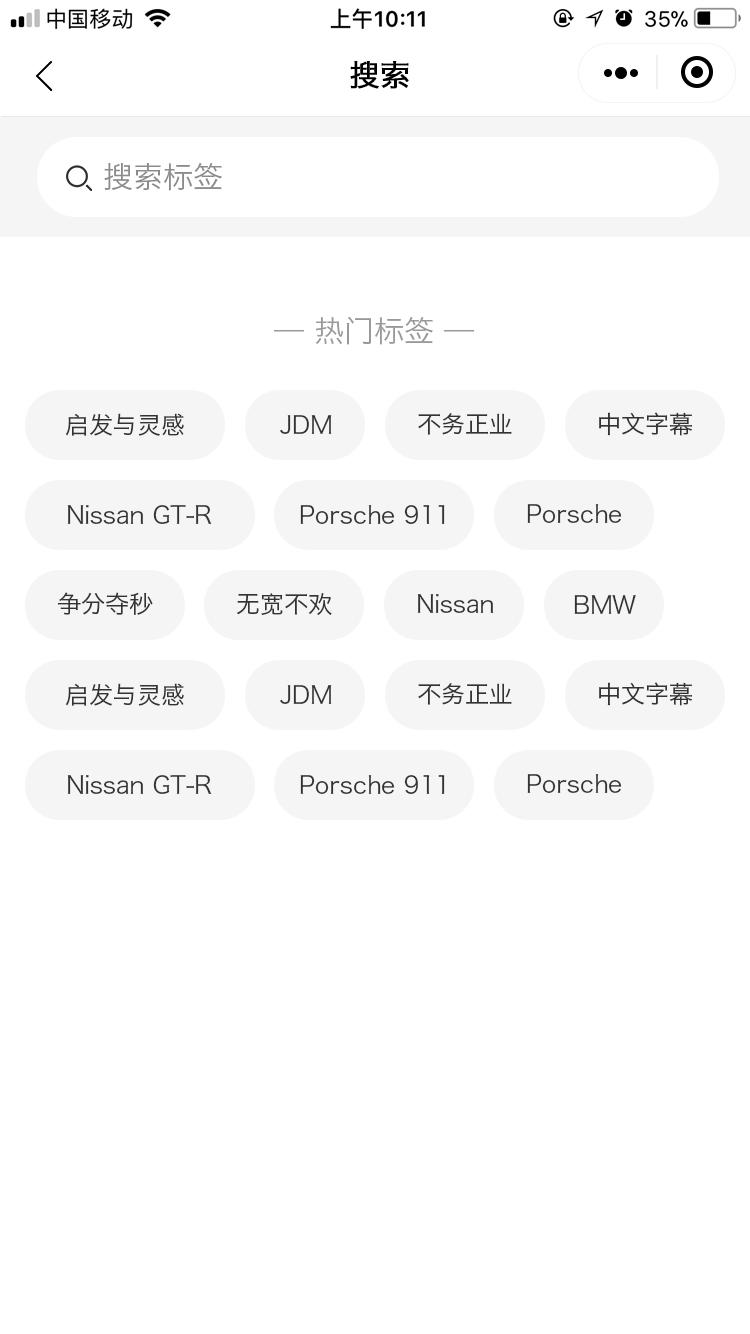
<style>
.page{position:relative;width:750px;height:1334px;background:#ffffff}
.page>*{position:absolute;margin:0}
.t1{font:30px "HiraginoSansGB-W3";color:#000000;text-transform:uppercase;font-weight:bold}
.t2{font:30px "HiraginoSansGB-W3";color:#8b8b8b;text-transform:uppercase}
.t3{font:30px "HiraginoSansGB-W3";color:#999999;text-transform:uppercase}
.t4{font:24px "HiraginoSansGB-W3";color:#333333;text-transform:uppercase}
.t5{font:24px "HiraginoSansGB-W3";color:#333333}
</style>
<div class="page">
<p class="t1" style="left:350px;top:61px;width:59px;height:28px">搜索</p>
<p class="t2" style="left:104px;top:163px;width:118px;height:28px">搜索标签</p>
<p class="t3" style="left:273px;top:316px;width:202px;height:29px">— 热门标签 —</p>
<p class="t4" style="left:65px;top:413px;width:119px;height:23px">启发与灵感</p>
<p class="t4" style="left:418px;top:413px;width:94px;height:22px">不务正业</p>
<p class="t4" style="left:599px;top:412px;width:93px;height:24px">中文字幕</p>
<p class="t4" style="left:280px;top:415px;width:52px;height:19px">JDM</p>
<p class="t5" style="left:67px;top:505px;width:145px;height:19px">Nissan GT-R</p>
<p class="t5" style="left:300px;top:505px;width:145px;height:19px">Porsche 911</p>
<p class="t5" style="left:527px;top:504px;width:95px;height:19px">Porsche</p>
<p class="t4" style="left:58px;top:592px;width:95px;height:23px">争分夺秒</p>
<p class="t4" style="left:236px;top:593px;width:96px;height:22px">无宽不欢</p>
<p class="t5" style="left:417px;top:594px;width:77px;height:19px">Nissan</p>
<p class="t4" style="left:574px;top:595px;width:62px;height:19px">BMW</p>
<p class="t4" style="left:65px;top:683px;width:119px;height:23px">启发与灵感</p>
<p class="t4" style="left:280px;top:685px;width:52px;height:19px">JDM</p>
<p class="t4" style="left:418px;top:683px;width:94px;height:22px">不务正业</p>
<p class="t4" style="left:599px;top:682px;width:93px;height:24px">中文字幕</p>
<p class="t5" style="left:527px;top:774px;width:95px;height:19px">Porsche</p>
<p class="t5" style="left:67px;top:775px;width:145px;height:19px">Nissan GT-R</p>
<p class="t5" style="left:300px;top:775px;width:145px;height:19px">Porsche 911</p>
</div>
